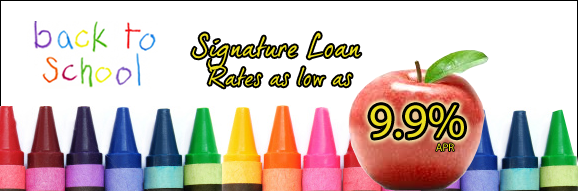
<style>
.page{position:relative;width:578px;height:191px;background:#ffffff}
.page>*{position:absolute;margin:0}
.t1{font:24px "DearJoe5CASUAL";color:#ebdf21}
.t2{font:28px "DearJoe5CASUAL";color:#ebdf21}
.t3{font:48px "MyriadPro-Regular";color:#ebdf21}
.t4{font:11px "MyriadPro-Regular";color:#ebdf21}
</style>
<div class="page">
<p class="t1" style="left:192px;top:32px;width:169px;height:56px;text-align:center"><span class="t2">Signature Loan <br></span>Rates as low as</p>
<p class="t3" style="left:370px;top:105px;width:94px;height:33px">9.9%</p>
<p class="t4" style="left:436px;top:143px;width:18px;height:8px">APR</p>
</div>
